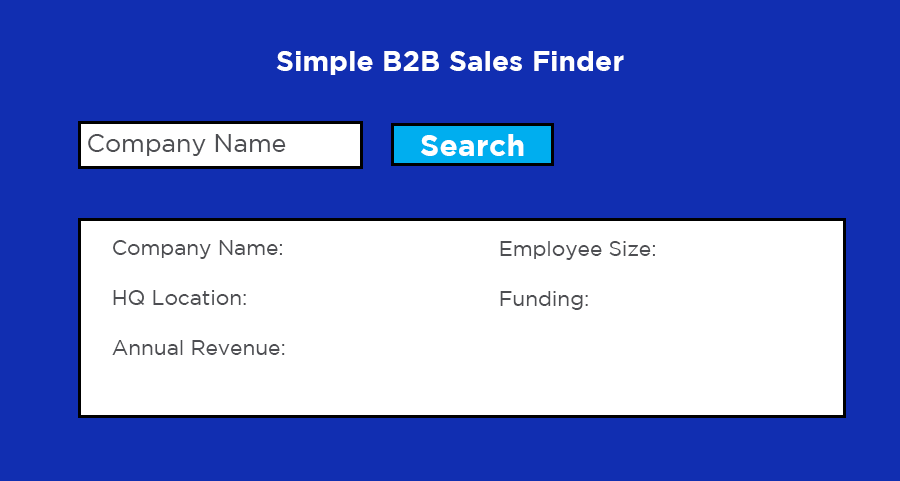
<style>
.page{position:relative;width:900px;height:481px;background:#112eb1}
.page>*{position:absolute;margin:0}
.t1{font:28.1px "GothamBold";color:#ffffff}
.t2{font:25px "GothamBook";color:#4d4e52}
.t3{font:30.5px "GothamBold";color:#ffffff}
.t4{font:20.8px/25px "GothamBook";color:#4d4e52}
</style>
<div class="page">
<p class="t1" style="left:276px;top:51px;width:348px;height:24px">Simple B2B Sales Finder</p>
<p class="t2" style="left:88px;top:134px;width:198px;height:22px">Company Name</p>
<p class="t3" style="left:421px;top:134px;width:103px;height:22px">Search</p>
<p class="t4" style="left:112px;top:240px;width:173px;height:115px">Company Name:<br><br>HQ Location:<br><br>Annual Revenue:</p>
<p class="t4" style="left:500px;top:241px;width:155px;height:69px">Employee Size:<br><br>Funding:</p>
</div>
